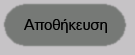
<style>
.page{position:relative;width:135px;height:55px;background:#767976}
.page>*{position:absolute;margin:0}
.t1{font:14.7px "ArialMT";color:#000000}
</style>
<div class="page">
<p class="t1" style="left:24px;top:19px;width:83px;height:14px">Αποθήκευση</p>
</div>
